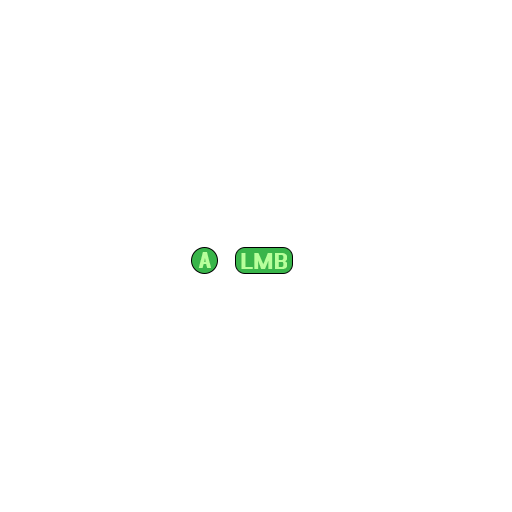
<style>
.page{position:relative;width:512px;height:512px;background:#ffffff}
.page>*{position:absolute;margin:0}
.t1{font:25px "AccidentalPresidency";color:#b7ff9b;scale:1.47 1}
</style>
<div class="page">
<p class="t1" style="left:198px;top:252px;width:13px;height:16px">A</p>
<p class="t1" style="left:241px;top:253px;width:46px;height:16px">LMB</p>
</div>
